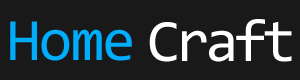
<style>
.page{position:relative;width:300px;height:80px;background:#191919}
.page>*{position:absolute;margin:0}
.t1{font:60.4px "Consolas";letter-spacing:-0.025em;color:#00adfc}
.t2{font:60.4px "Consolas";letter-spacing:-0.07em;color:#ffffff}
</style>
<div class="page">
<p class="t1" style="left:10px;top:21px;width:122px;height:40px">Home</p>
<p class="t2" style="left:149px;top:19px;width:143px;height:43px">Craft</p>
</div>
